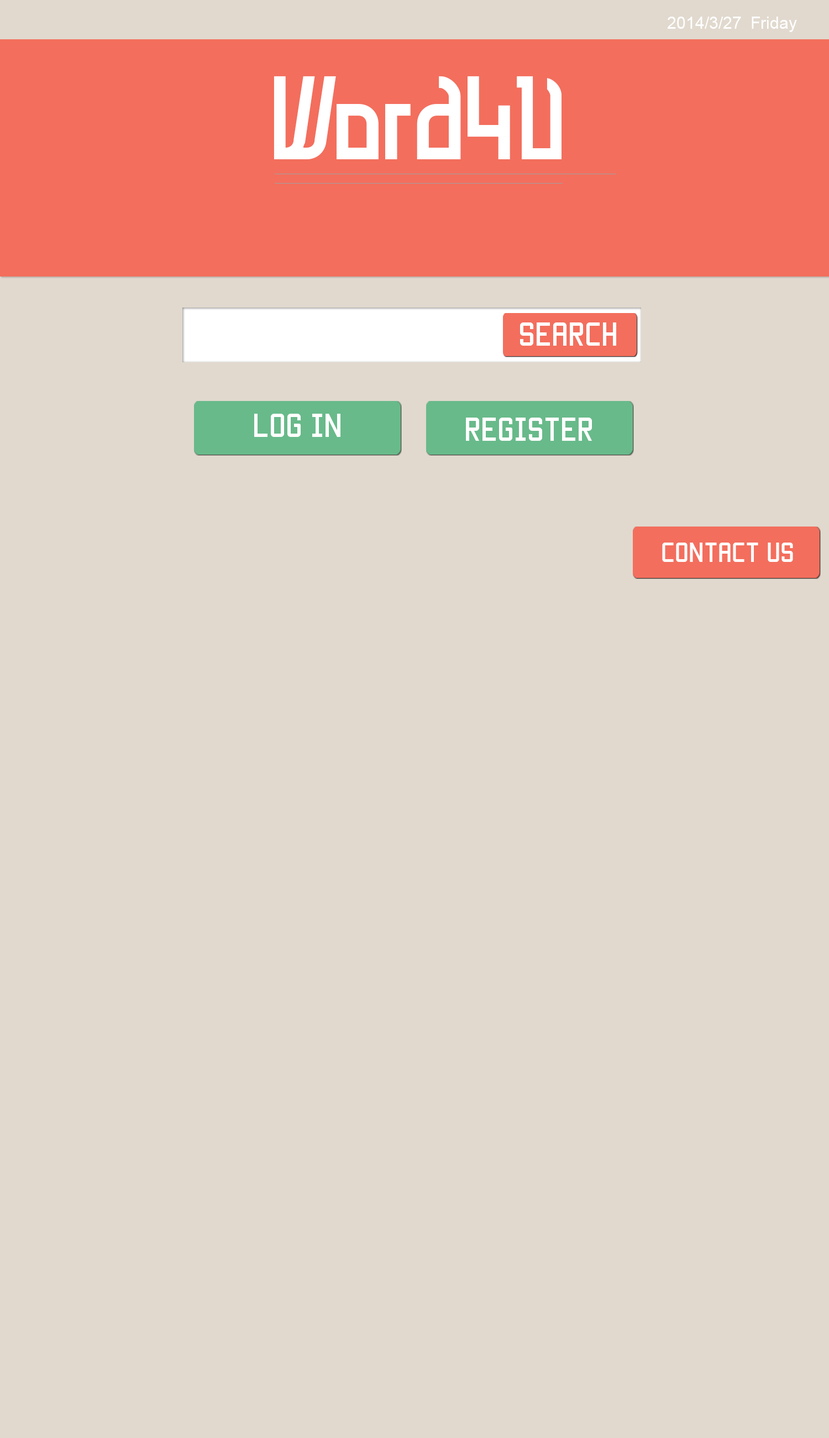
<style>
.page{position:relative;width:829px;height:1438px;background:#e1d9ce}
.page>*{position:absolute;margin:0}
.t1{font:16.6px "ArialMT";color:#ffffff}
.t2{font:110.6px "QuatSteel-DemiBold";color:#ffffff}
.t3{font:26.5px "Manteka";color:#ffffff}
.t4{font:22.1px "Manteka";color:#ffffff}
</style>
<div class="page">
<p class="t1" style="left:667px;top:17px;width:130px;height:15px">2014/3/27  Friday</p>
<p class="t2" style="left:274px;top:76px;width:288px;height:83px">Word4U</p>
<p class="t3" style="left:520px;top:322px;width:97px;height:24px">search</p>
<p class="t3" style="left:254px;top:414px;width:87px;height:23px">log in</p>
<p class="t3" style="left:466px;top:417px;width:126px;height:24px">Register</p>
<p class="t4" style="left:662px;top:542px;width:131px;height:20px">Contact us</p>
</div>
